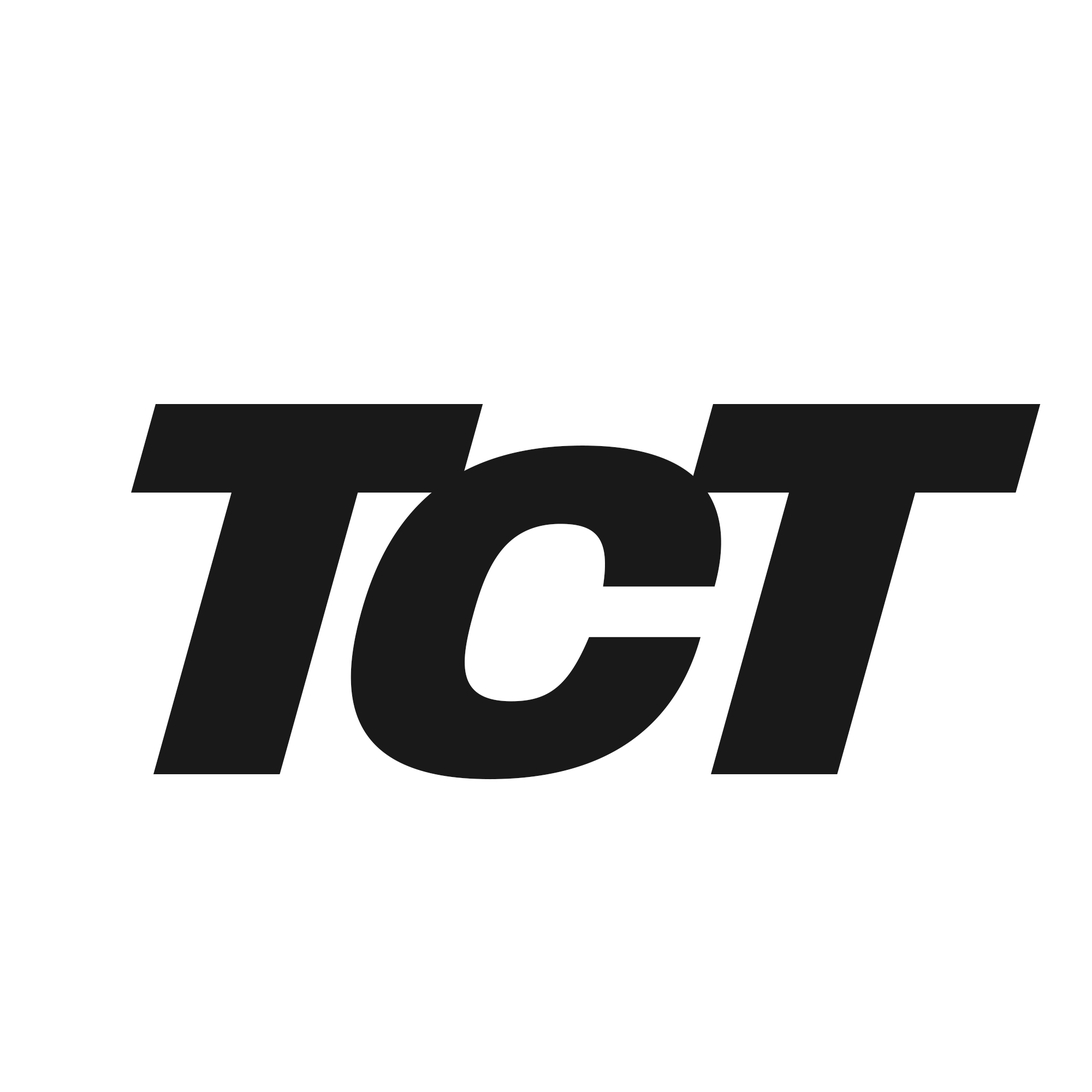
<style>
.page{position:relative;width:1092px;height:1092px;background:#ffffff}
.page>*{position:absolute;margin:0}
.t1{font:600.6px "Paralucent-Heavy";letter-spacing:-0.14em;color:#191919;scale:1.11 1}
.t2{font:524.7px "Paralucent-Heavy";letter-spacing:-0.14em;color:#191919;scale:1.11 1}
</style>
<div class="page">
<p class="t1" style="left:131px;top:404px;width:910px;height:376px">T<span class="t2">C</span>T</p>
</div>
